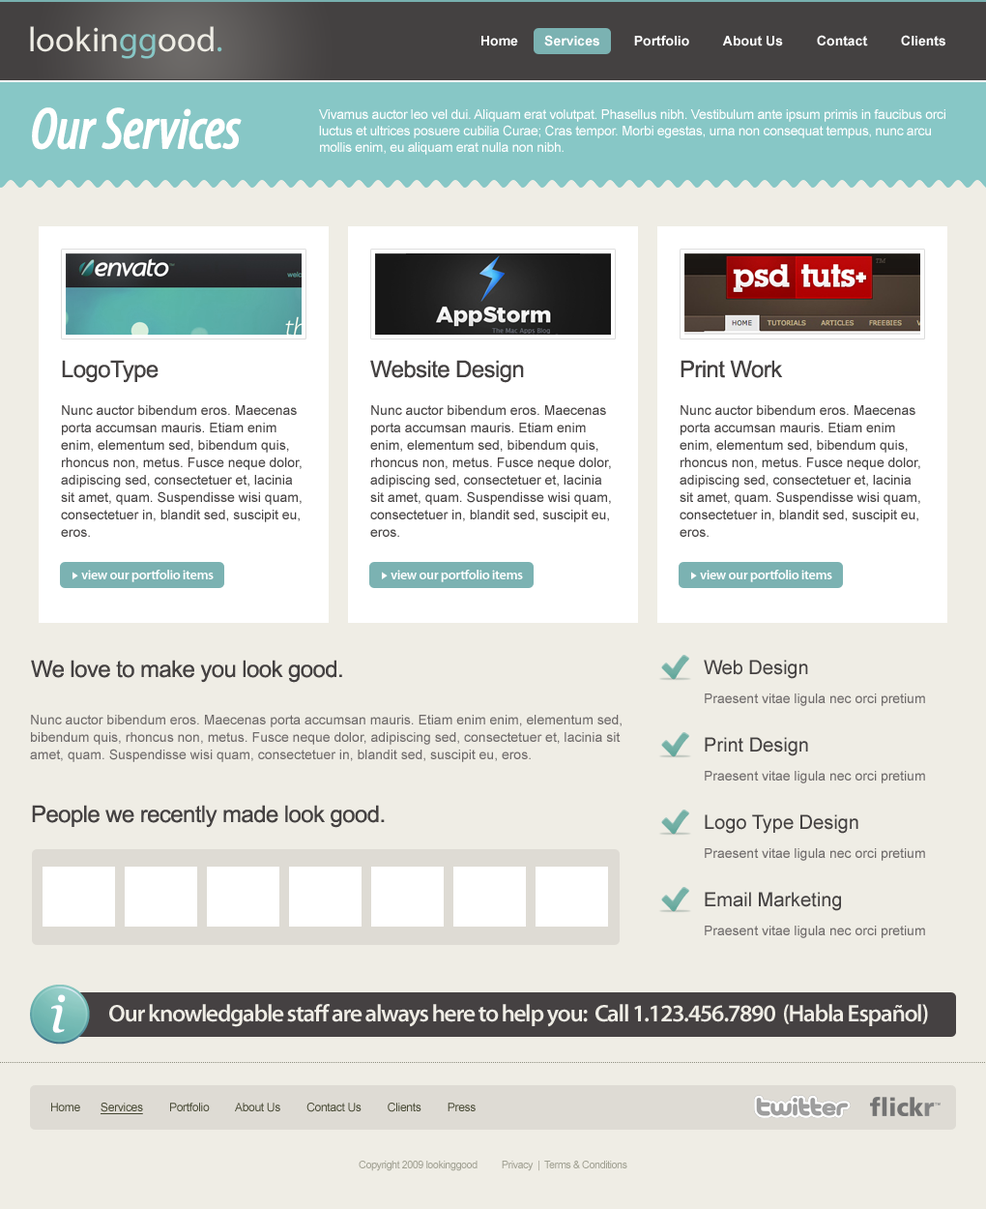
<style>
.page{position:relative;width:986px;height:1209px;background:#efede5}
.page>*{position:absolute;margin:0}
.t1{font:34.8px "MyriadPro-Regular";color:#efede5}
.t2{font:34.8px "MyriadPro-Regular";color:#87c7c6}
.t3{font:13.5px "Arial-BoldMT";color:#ffffff}
.t4{font:58px "MyriadPro-CondIt";letter-spacing:-0.025em;color:#fffffe;font-weight:bold}
.t5{font:13.5px "ArialMT";letter-spacing:-0.025em;color:#ffffff}
.t6{font:23.2px "ArialMT";letter-spacing:-0.025em;color:#444141}
.t7{font:13.5px/17.4px "ArialMT";color:#444141}
.t8{font:13.5px "MyriadPro-Semibold";letter-spacing:-0.025em;color:#ffffff}
.t9{font:13.5px/29px "ArialMT";color:#6e6a6a}
.t10{font:19.3px/29px "ArialMT";color:#444141}
.t11{font:13.5px/17.4px "ArialMT";color:#6e6a6a}
.t12{font:24.2px "MyriadPro-Semibold";letter-spacing:-0.05em;color:#efede5}
.t13{font:11.6px "ArialMT";letter-spacing:-0.025em;color:#464833}
.t14{font:11.6px "ArialMT";letter-spacing:-0.025em;color:#464833;text-decoration:underline}
.t15{font:10.6px "ArialMT";letter-spacing:-0.05em;color:#a1a193}
</style>
<div class="page">
<p class="t1" style="left:30px;top:26px;width:192px;height:33px">lookin<span class="t2">gg</span>ood<span class="t2">.</span></p>
<p class="t3" style="left:482px;top:35px;width:464px;height:11px">Home       Services         Portfolio         About Us         Contact         Clients</p>
<p class="t4" style="left:32px;top:107px;width:210px;height:43px">Our Services</p>
<p class="t5" style="left:319px;top:109px;width:627px;height:46px">Vivamus auctor leo vel dui. Aliquam erat volutpat. Phasellus nibh. Vestibulum ante ipsum primis in faucibus orci luctus et ultrices posuere cubilia Curae; Cras tempor. Morbi egestas, urna non consequat tempus, nunc arcu mollis enim, eu aliquam erat nulla non nibh.</p>
<p class="t6" style="left:62px;top:360px;width:97px;height:23px">LogoType</p>
<p class="t6" style="left:370px;top:360px;width:154px;height:23px">Website Design</p>
<p class="t6" style="left:681px;top:360px;width:102px;height:18px">Print Work</p>
<p class="t7" style="left:61px;top:405px;width:241px;height:132px">Nunc auctor bibendum eros. Maecenas porta accumsan mauris. Etiam enim enim, elementum sed, bibendum quis, rhoncus non, metus. Fusce neque dolor, adipiscing sed, consectetuer et, lacinia sit amet, quam. Suspendisse wisi quam, consectetuer in, blandit sed, suscipit eu, eros.</p>
<p class="t7" style="left:370px;top:405px;width:241px;height:132px">Nunc auctor bibendum eros. Maecenas porta accumsan mauris. Etiam enim enim, elementum sed, bibendum quis, rhoncus non, metus. Fusce neque dolor, adipiscing sed, consectetuer et, lacinia sit amet, quam. Suspendisse wisi quam, consectetuer in, blandit sed, suscipit eu, eros.</p>
<p class="t7" style="left:680px;top:405px;width:241px;height:132px">Nunc auctor bibendum eros. Maecenas porta accumsan mauris. Etiam enim enim, elementum sed, bibendum quis, rhoncus non, metus. Fusce neque dolor, adipiscing sed, consectetuer et, lacinia sit amet, quam. Suspendisse wisi quam, consectetuer in, blandit sed, suscipit eu, eros.</p>
<p class="t8" style="left:81px;top:570px;width:133px;height:12px">view our portfolio items</p>
<p class="t8" style="left:391px;top:570px;width:132px;height:12px">view our portfolio items</p>
<p class="t8" style="left:700px;top:570px;width:133px;height:12px">view our portfolio items</p>
<p class="t6" style="left:31px;top:660px;width:311px;height:23px">We love to make you look good.</p>
<p class="t9" style="left:704px;top:660px;width:221px;height:46px"><span class="t10">Web Design<br></span>Praesent vitae ligula nec orci pretium</p>
<p class="t11" style="left:30px;top:715px;width:592px;height:47px">Nunc auctor bibendum eros. Maecenas porta accumsan mauris. Etiam enim enim, elementum sed, bibendum quis, rhoncus non, metus. Fusce neque dolor, adipiscing sed, consectetuer et, lacinia sit amet, quam. Suspendisse wisi quam, consectetuer in, blandit sed, suscipit eu, eros.</p>
<p class="t9" style="left:705px;top:737px;width:220px;height:46px"><span class="t10">Print Design<br></span>Praesent vitae ligula nec orci pretium</p>
<p class="t6" style="left:32px;top:805px;width:353px;height:23px">People we recently made look good.</p>
<p class="t9" style="left:705px;top:814px;width:220px;height:47px"><span class="t10">Logo Type Design<br></span>Praesent vitae ligula nec orci pretium</p>
<p class="t9" style="left:705px;top:892px;width:220px;height:46px"><span class="t10">Email Marketing</span><br>Praesent vitae ligula nec orci pretium</p>
<p class="t12" style="left:109px;top:1004px;width:819px;height:23px">Our knowledgable staff are always here to help you:  Call 1.123.456.7890  (Habla Español)</p>
<p class="t13" style="left:51px;top:1102px;width:425px;height:12px">Home       <span class="t14">Services</span>         Portfolio         About Us         Contact Us         Clients         Press</p>
<p class="t15" style="left:359px;top:1160px;width:269px;height:11px">Copyright 2009 lookinggood          Privacy  |  Terms &amp; Conditions</p>
</div>
